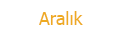
<style>
.page{position:relative;width:120px;height:40px;background:#ffffff}
.page>*{position:absolute;margin:0}
.t1{font:18px "Tahoma";color:#eeaa22}
</style>
<div class="page">
<p class="t1" style="left:39px;top:11px;width:44px;height:14px">Aralık</p>
</div>
